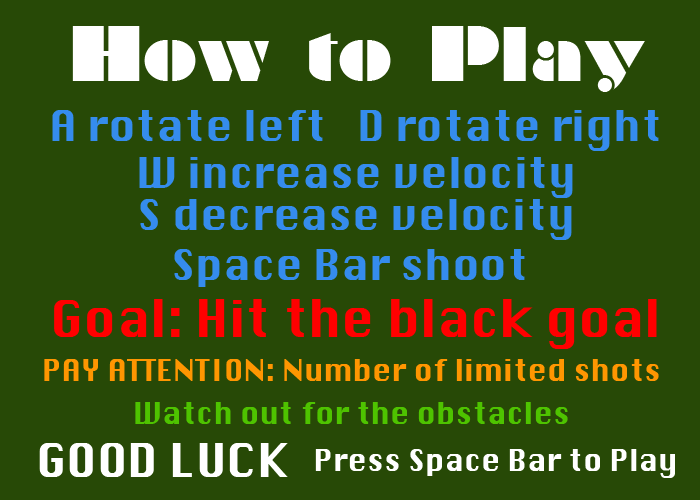
<style>
.page{position:relative;width:700px;height:500px;background:#274906}
.page>*{position:absolute;margin:0}
.t1{font:70.8px "Braggadocio";color:#ffffff}
.t2{font:41.7px "Krungthep";color:#358ced}
.t3{font:41.7px/41.7px "Krungthep";color:#358ced}
.t4{font:50px "Krungthep";color:#ff0000}
.t5{font:29.2px "Krungthep";color:#ff9601}
.t6{font:29.2px "Krungthep";color:#4ec300}
.t7{font:45.8px "Krungthep";color:#ffffff}
.t8{font:29.2px "Krungthep";color:#ffffff}
</style>
<div class="page">
<p class="t1" style="left:72px;top:26px;width:573px;height:66px">How to Play</p>
<p class="t2" style="left:52px;top:110px;width:607px;height:41px">A rotate left   D rotate right</p>
<p class="t3" style="left:139px;top:157px;width:434px;height:83px;text-align:center">W increase velocity<br>S decrease velocity</p>
<p class="t2" style="left:174px;top:249px;width:351px;height:38px">Space Bar shoot</p>
<p class="t4" style="left:54px;top:299px;width:603px;height:50px">Goal: Hit the black goal</p>
<p class="t5" style="left:44px;top:359px;width:615px;height:22px">PAY ATTENTION: Number of limited shots</p>
<p class="t6" style="left:135px;top:402px;width:433px;height:22px">Watch out for the obstacles</p>
<p class="t7" style="left:39px;top:443px;width:249px;height:34px">GOOD LUCK</p>
<p class="t8" style="left:315px;top:449px;width:360px;height:29px">Press Space Bar to Play</p>
</div>
